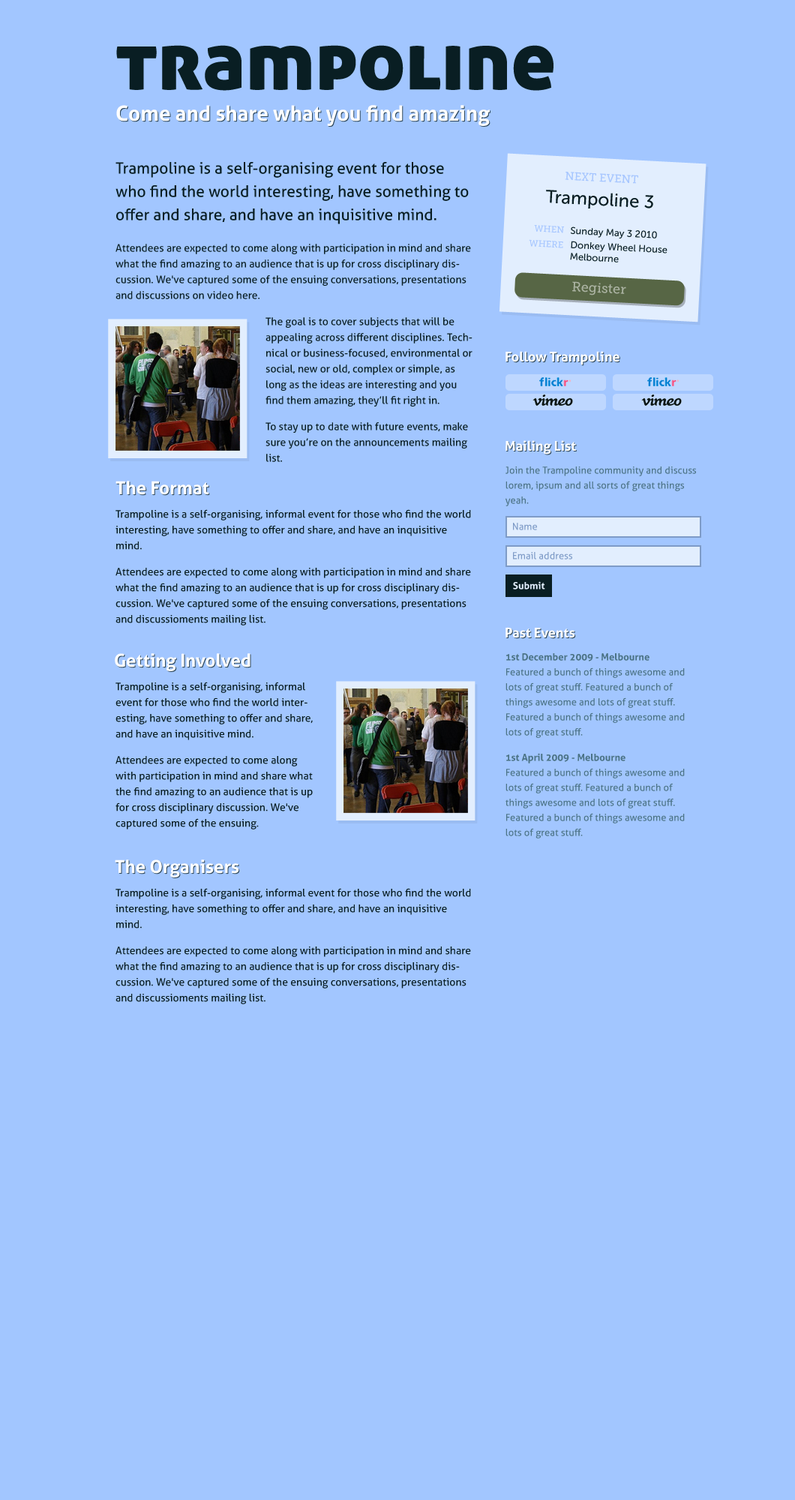
<style>
.page{position:relative;width:795px;height:1500px;background:#a2c6ff}
.page>*{position:absolute;margin:0}
.t1{font:82.5px "AllerDisplay";color:#091e23}
.t2{font:21px "Aller-Bold";color:#ffffff}
.t3{font:10.5px/15.7px "Aller";color:#091e23}
.t4{font:15.7px/23.2px "Aller";color:#091e23}
.t5{font:11.2px "MuseoSlab-500";color:#a6c6ff;text-transform:uppercase}
.t6{font:18px "MuseoSans-500";color:#091e23}
.t7{font:9px "MuseoSlab-500";color:#a6c6ff;text-transform:uppercase}
.t8{font:9.7px "MuseoSans-500";color:#091e23}
.t9{font:13.5px "MuseoSlab-500";color:#abb3a2}
.t10{font:13.5px "Aller-Bold";color:#ffffff}
.t11{font:9.7px/15px "Aller";color:#4c7385}
.t12{font:18px "Aller-Bold";color:#ffffff}
.t13{font:9.7px "Aller";color:#7e9bc7}
.t14{font:9.7px "Aller-Bold";color:#e2eefe}
.t15{font:9.7px/15px "Aller";color:#4b7385}
.t16{font:9.7px/15px "Aller-Bold";color:#4b7385}
</style>
<div class="page">
<p class="t1" style="left:116px;top:45px;width:437px;height:46px">trampoline</p>
<p class="t2" style="left:116px;top:105px;width:374px;height:21px">Come and share what you find amazing</p>
<p class="t3" style="left:115px;top:162px;width:357px;height:300px"><span class="t4">Trampoline is a self-organising event for those who find the world interesting, have something to offer and share, and have an inquisitive mind. <br></span>Attendees are expected to come along with participation in mind and share what the find amazing to an audience that is up for cross disciplinary discussion. We've captured some of the ensuing conversations, presentations and discussions on video here.<br>The goal is to cover subjects that will be appealing across different disciplines. Technical or business-focused, environmental or social, new or old, complex or simple‚ as long as the ideas are interesting and you find them amazing, they’ll fit right in.<br>To stay up to date with future events, make sure you’re on the announcements mailing list.</p>
<p class="t5" style="left:565px;top:172px;width:73px;height:12px;rotate:3deg">Next event</p>
<p class="t6" style="left:546px;top:190px;width:107px;height:18px;rotate:3deg">Trampoline 3</p>
<p class="t7" style="left:534px;top:225px;width:30px;height:8px;rotate:3deg">when</p>
<p class="t8" style="left:570px;top:226px;width:87px;height:12px;rotate:3deg">Sunday May 3 2010</p>
<p class="t7" style="left:529px;top:239px;width:34px;height:9px;rotate:3deg">wheRE</p>
<p class="t8" style="left:570px;top:241px;width:97px;height:21px;rotate:3deg">Donkey Wheel House<br>Melbourne</p>
<p class="t9" style="left:572px;top:281px;width:54px;height:14px;rotate:3deg">Register</p>
<p class="t10" style="left:505px;top:351px;width:114px;height:14px">Follow Trampoline</p>
<p class="t10" style="left:505px;top:440px;width:71px;height:14px">Mailing List</p>
<p class="t11" style="left:505px;top:466px;width:191px;height:40px">Join the Trampoline community and discuss lorem, ipsum and all sorts of great things yeah.</p>
<p class="t12" style="left:115px;top:481px;width:94px;height:14px">The Format</p>
<p class="t3" style="left:115px;top:509px;width:356px;height:116px">Trampoline is a self-organising, informal event for those who find the world interesting, have something to offer and share, and have an inquisitive mind. <br>Attendees are expected to come along with participation in mind and share what the find amazing to an audience that is up for cross disciplinary discussion. We've captured some of the ensuing conversations, presentations and discussioments mailing list.</p>
<p class="t13" style="left:513px;top:523px;width:24px;height:7px">Name</p>
<p class="t13" style="left:513px;top:552px;width:59px;height:7px">Email address</p>
<p class="t14" style="left:513px;top:581px;width:32px;height:8px">Submit</p>
<p class="t10" style="left:505px;top:627px;width:70px;height:11px">Past Events</p>
<p class="t12" style="left:115px;top:653px;width:135px;height:18px">Getting Involved</p>
<p class="t15" style="left:505px;top:653px;width:180px;height:185px"><span class="t16">1st December 2009 - Melbourne<br></span>Featured a bunch of things awesome and lots of great stuff. Featured a bunch of things awesome and lots of great stuff. Featured a bunch of things awesome and lots of great stuff. <br><span class="t16">1st April 2009 - Melbourne<br></span>Featured a bunch of things awesome and lots of great stuff. Featured a bunch of things awesome and lots of great stuff. Featured a bunch of things awesome and lots of great stuff.</p>
<p class="t3" style="left:115px;top:682px;width:198px;height:147px">Trampoline is a self-organising, informal event for those who find the world interesting, have something to offer and share, and have an inquisitive mind. <br>Attendees are expected to come along with participation in mind and share what the find amazing to an audience that is up for cross disciplinary discussion. We've captured some of the ensuing.</p>
<p class="t12" style="left:115px;top:859px;width:124px;height:18px">The Organisers</p>
<p class="t3" style="left:115px;top:888px;width:356px;height:116px">Trampoline is a self-organising, informal event for those who find the world interesting, have something to offer and share, and have an inquisitive mind. <br>Attendees are expected to come along with participation in mind and share what the find amazing to an audience that is up for cross disciplinary discussion. We've captured some of the ensuing conversations, presentations and discussioments mailing list.</p>
</div>
